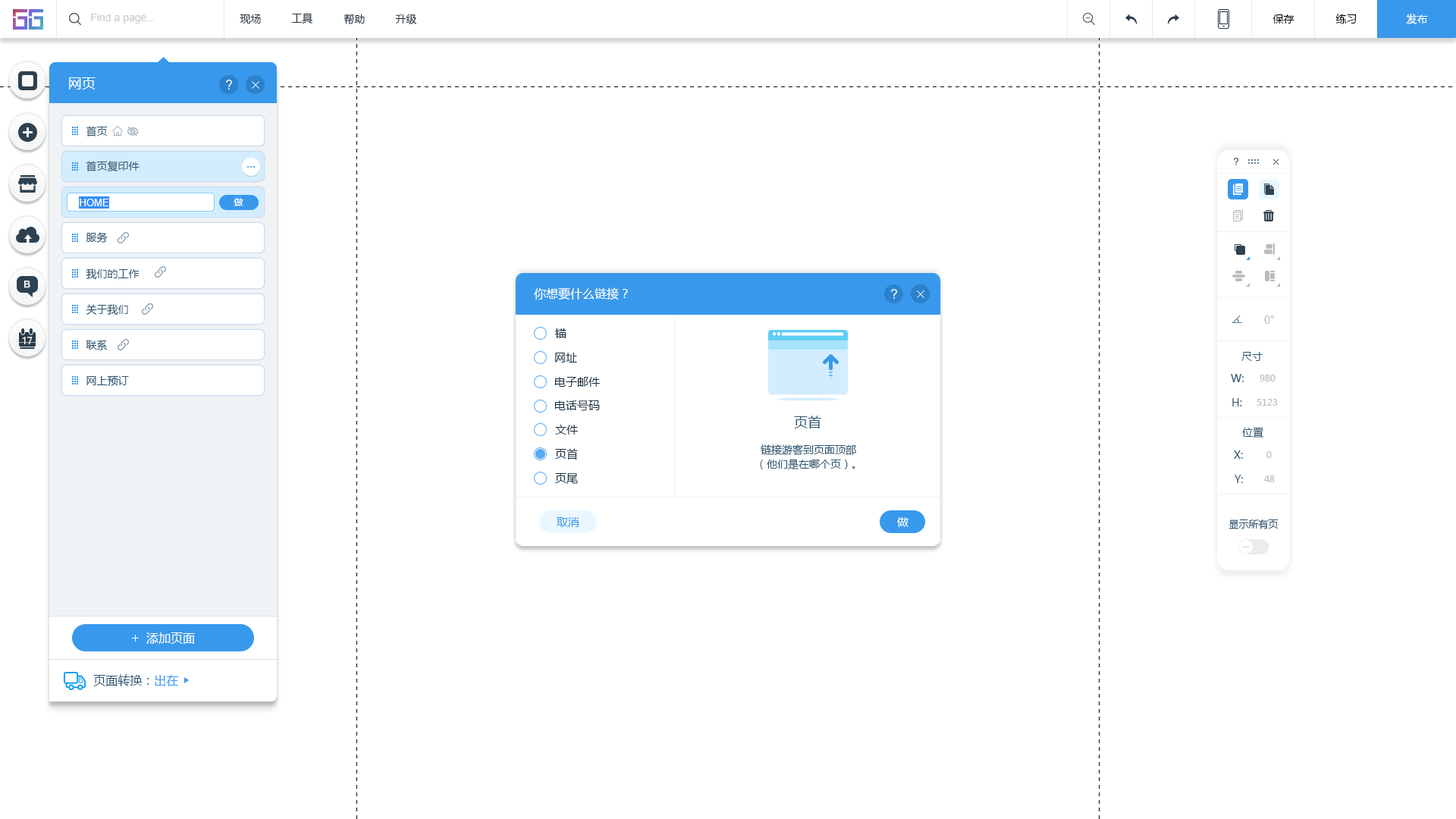
<style>
.page{position:relative;width:1456px;height:819px;background:#ffffff}
.page>*{position:absolute;margin:0}
.t1{font:10.6px "ArialMT";color:#cccccc}
.t2{font:10.6px "MicrosoftYaHei";color:#20303c}
.t3{font:10.6px "MicrosoftYaHei";color:#000000}
.t4{font:10.6px "MicrosoftYaHei";color:#ffffff}
.t5{font:13.6px "MicrosoftYaHei";color:#ffffff}
.t6{font:10.6px "MicrosoftYaHei";color:#2b5672}
.t7{font:9.1px "MicrosoftYaHei";color:#ffffff}
.t8{font:9.9px "ArialMT";color:#ffffff}
.t9{font:12.1px "MicrosoftYaHei";color:#ffffff}
.t10{font:10.6px "MicrosoftYaHei";color:#bcbcbc}
.t11{font:11.4px "MicrosoftYaHei";color:#162d3d}
.t12{font:9.1px "MicrosoftYaHei";color:#bcbcbc}
.t13{font:13.6px "MicrosoftYaHei";color:#2b5672}
.t14{font:11.4px "MicrosoftYaHei";color:#3899ec}
.t15{font:11.4px "MicrosoftYaHei";color:#ffffff}
.t16{font:9.9px "MicrosoftYaHei";color:#2b5672}
.t17{font:9.1px "MicrosoftYaHei";color:#2b5672}
.t18{font:9.1px "MicrosoftYaHei";color:#3899ec}
</style>
<div class="page">
<p class="t1" style="left:91px;top:14px;width:64px;height:10px">Find a page...</p>
<p class="t2" style="left:240px;top:14px;width:21px;height:10px">现场</p>
<p class="t2" style="left:291px;top:13px;width:22px;height:11px">工具</p>
<p class="t2" style="left:344px;top:14px;width:21px;height:11px">帮助</p>
<p class="t2" style="left:395px;top:14px;width:22px;height:10px">升级</p>
<p class="t3" style="left:1272px;top:14px;width:22px;height:10px">保存</p>
<p class="t3" style="left:1335px;top:14px;width:22px;height:10px">练习</p>
<p class="t4" style="left:1406px;top:14px;width:22px;height:10px">发布</p>
<p class="t5" style="left:69px;top:77px;width:27px;height:12px">网页</p>
<p class="t6" style="left:86px;top:126px;width:22px;height:10px">首页</p>
<p class="t6" style="left:86px;top:161px;width:54px;height:11px">首页复印件</p>
<p class="t7" style="left:234px;top:198px;width:9px;height:8px">做</p>
<p class="t8" style="left:80px;top:199px;width:29px;height:7px">HOME</p>
<p class="t6" style="left:86px;top:232px;width:22px;height:11px">服务</p>
<p class="t6" style="left:86px;top:268px;width:54px;height:12px">我们的工作</p>
<p class="t9" style="left:534px;top:287px;width:94px;height:13px">你想要什么链接？</p>
<p class="t6" style="left:86px;top:304px;width:42px;height:11px">关于我们</p>
<p class="t10" style="left:1264px;top:315px;width:11px;height:9px">0°</p>
<p class="t11" style="left:555px;top:328px;width:11px;height:10px">锚</p>
<p class="t6" style="left:86px;top:340px;width:21px;height:10px">联系</p>
<p class="t11" style="left:555px;top:353px;width:22px;height:9px">网址</p>
<p class="t6" style="left:1241px;top:352px;width:22px;height:9px">尺寸</p>
<p class="t6" style="left:86px;top:375px;width:43px;height:11px">网上预订</p>
<p class="t11" style="left:554px;top:377px;width:46px;height:10px">电子邮件</p>
<p class="t6" style="left:1231px;top:374px;width:13px;height:8px">W:</p>
<p class="t12" style="left:1260px;top:375px;width:15px;height:6px">980</p>
<p class="t11" style="left:554px;top:400px;width:46px;height:11px">电话号码</p>
<p class="t6" style="left:1232px;top:398px;width:10px;height:8px">H:</p>
<p class="t12" style="left:1257px;top:399px;width:21px;height:7px">5123</p>
<p class="t11" style="left:555px;top:425px;width:23px;height:10px">文件</p>
<p class="t13" style="left:794px;top:416px;width:27px;height:12px">页首</p>
<p class="t6" style="left:1242px;top:427px;width:22px;height:11px">位置</p>
<p class="t11" style="left:555px;top:448px;width:23px;height:12px">页首</p>
<p class="t6" style="left:761px;top:444px;width:95px;height:11px">链接游客到页面顶部</p>
<p class="t6" style="left:760px;top:459px;width:95px;height:10px">（他们是在哪个页）。</p>
<p class="t6" style="left:1234px;top:450px;width:9px;height:9px">X:</p>
<p class="t12" style="left:1266px;top:451px;width:6px;height:7px">0</p>
<p class="t11" style="left:555px;top:473px;width:23px;height:11px">页尾</p>
<p class="t6" style="left:1235px;top:475px;width:8px;height:8px">Y:</p>
<p class="t12" style="left:1264px;top:475px;width:11px;height:7px">48</p>
<p class="t14" style="left:557px;top:517px;width:22px;height:10px">取消</p>
<p class="t15" style="left:897px;top:517px;width:11px;height:10px">做</p>
<p class="t16" style="left:1228px;top:519px;width:51px;height:10px">显示所有页</p>
<p class="t9" style="left:146px;top:632px;width:49px;height:12px">添加页面</p>
<p class="t17" style="left:93px;top:674px;width:86px;height:12px">页面转换：<span class="t18">出在</span></p>
</div>
